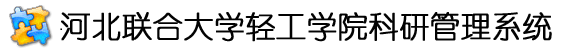
<style>
.page{position:relative;width:580px;height:52px;background:#ffffff}
.page>*{position:absolute;margin:0}
.t1{font:30px "YouYuan";color:#020202;font-weight:bold}
</style>
<div class="page">
<p class="t1" style="left:61px;top:12px;width:491px;height:30px">河北联合大学轻工学院科研管理系统</p>
</div>
